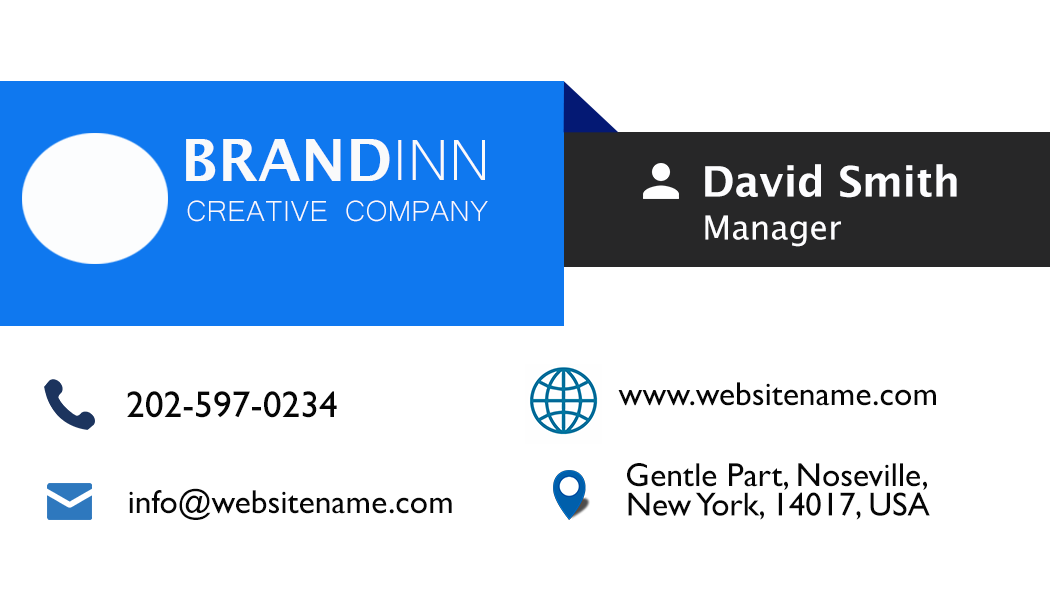
<style>
.page{position:relative;width:1050px;height:600px;background:#ffffff}
.page>*{position:absolute;margin:0}
.t1{font:58.3px "LucidaSans-Demi";color:#f9fafb}
.t2{font:75px "Microsoft-Yi-Baiti";color:#f9fafb}
.t3{font:41.7px "LucidaSans-Demi";color:#fdfdff}
.t4{font:37.5px "Microsoft-Yi-Baiti";color:#f9fafb}
.t5{font:33.3px "LucidaSansUnicode";color:#fdfdff}
.t6{font:33.3px "GillSansMT";color:#060606}
.t7{font:37.5px "GillSansMT";color:#060606}
</style>
<div class="page">
<p class="t1" style="left:186px;top:139px;width:204px;height:42px">BRAND</p>
<p class="t2" style="left:398px;top:140px;width:87px;height:40px">INN</p>
<p class="t3" style="left:705px;top:164px;width:252px;height:34px">David Smith</p>
<p class="t4" style="left:187px;top:200px;width:301px;height:22px">CREATIVE COMPANY</p>
<p class="t5" style="left:705px;top:215px;width:136px;height:32px">Manager</p>
<p class="t6" style="left:618px;top:382px;width:318px;height:24px">www.websitename.com</p>
<p class="t7" style="left:127px;top:391px;width:210px;height:27px">202-597-0234</p>
<p class="t6" style="left:627px;top:463px;width:300px;height:27px">Gentle Part, Noseville,</p>
<p class="t6" style="left:129px;top:488px;width:323px;height:32px">info@websitename.com</p>
<p class="t6" style="left:628px;top:492px;width:302px;height:28px">New York, 14017, USA</p>
</div>
